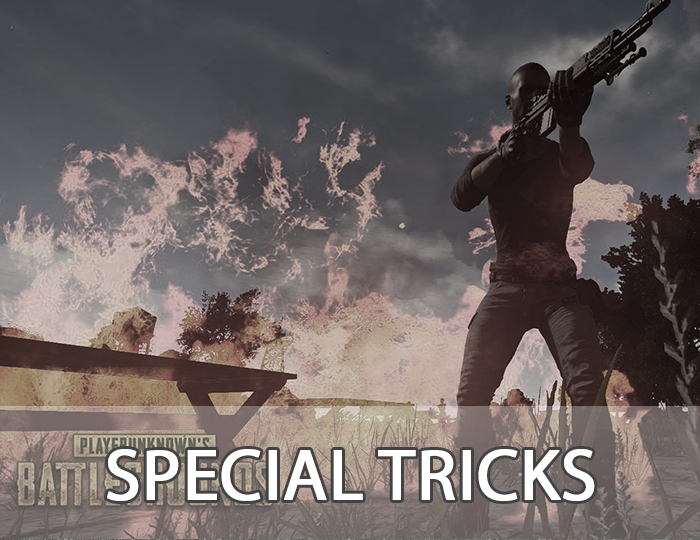
<style>
.page{position:relative;width:700px;height:540px}
.page>*{position:absolute;margin:0}
.t1{font:72px "MyriadPro-Regular";color:#ffffff;font-weight:bold}
</style>
<div class="page">
<p class="t1" style="left:107px;top:449px;width:488px;height:52px">SPECIAL TRICKS</p>
</div>
